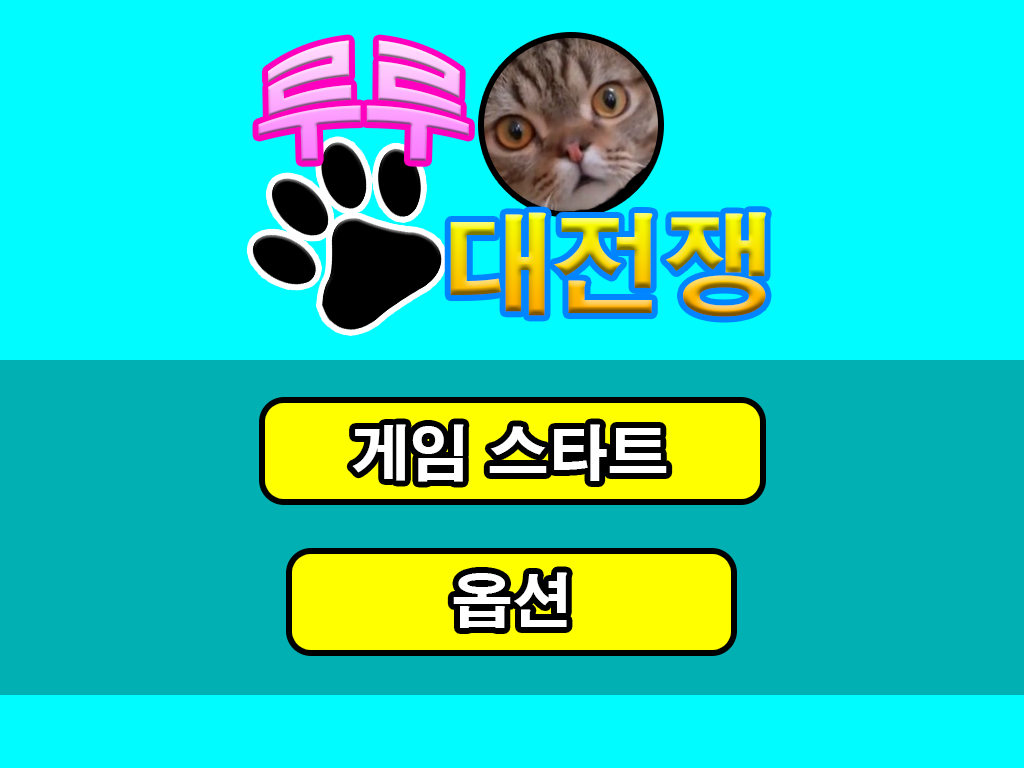
<style>
.page{position:relative;width:1024px;height:768px;background:#00fcff}
.page>*{position:absolute;margin:0}
.t1{font:90px "HYgtrE";scale:1.2 1}
.t2{font:110px "HYgtrE"}
.t3{font:60px "HYgtrE";color:#ffffff}
</style>
<div class="page">
<p class="t1" style="left:258px;top:40px;width:211px;height:121px">루루</p>
<p class="t2" style="left:450px;top:212px;width:316px;height:105px">대전쟁</p>
<p class="t3" style="left:352px;top:424px;width:315px;height:58px">게임 스타트</p>
<p class="t3" style="left:453px;top:572px;width:114px;height:56px">옵션</p>
</div>
